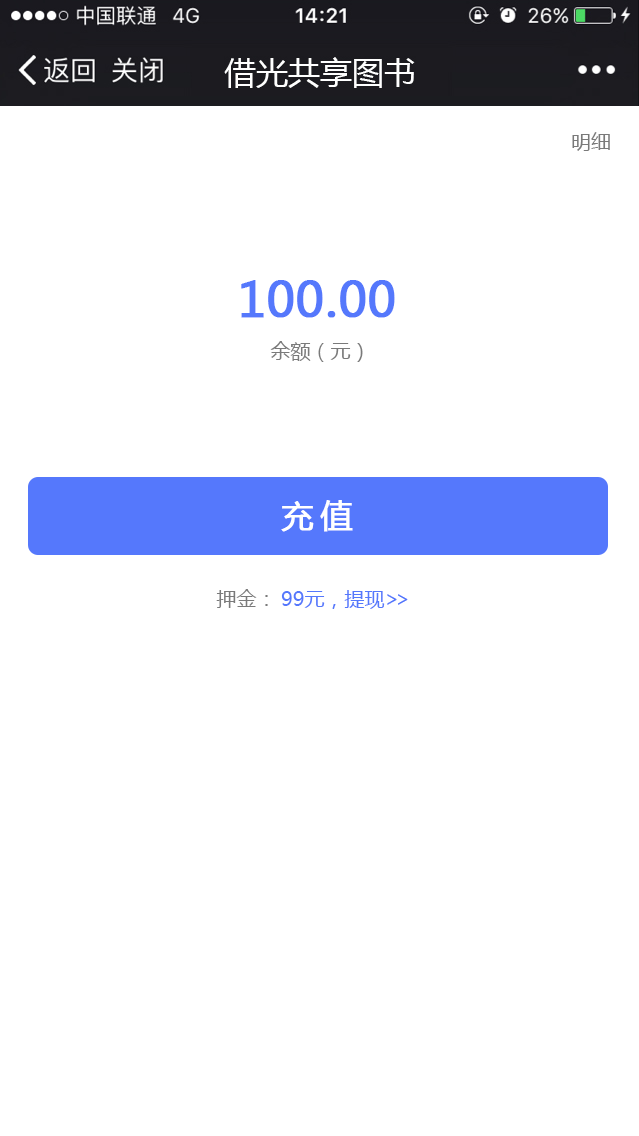
<style>
.page{position:relative;width:639px;height:1136px;background:#ffffff}
.page>*{position:absolute;margin:0}
.t1{font:20px "MicrosoftYaHei";color:#7a7a7a}
.t2{font:48px "MicrosoftYaHei";color:#5578fc;font-weight:bold}
.t3{font:32px "MicrosoftYaHei";letter-spacing:0.2em;color:#ffffff;font-weight:bold}
.t4{font:20px "MicrosoftYaHei";color:#5578fc}
.t5{font:20px "MicrosoftYaHei";letter-spacing:-0.2em;color:#5578fc}
</style>
<div class="page">
<p class="t1" style="left:572px;top:132px;width:38px;height:19px">明细</p>
<p class="t2" style="left:241px;top:280px;width:154px;height:38px">100.00</p>
<p class="t1" style="left:270px;top:341px;width:93px;height:21px">余额（元）</p>
<p class="t3" style="left:281px;top:500px;width:72px;height:32px">充值</p>
<p class="t1" style="left:216px;top:589px;width:52px;height:19px">押金：</p>
<p class="t4" style="left:281px;top:590px;width:127px;height:19px">99元，提现<span class="t5">&gt;&gt;</span></p>
</div>
